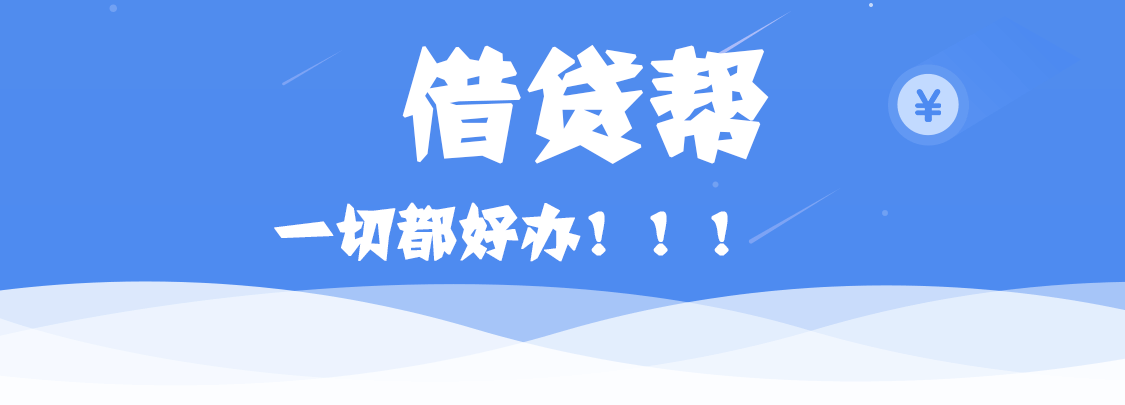
<style>
.page{position:relative;width:1125px;height:405px;background:#4f8bef}
.page>*{position:absolute;margin:0}
.t1{font:120px "JJianzi";color:#ffffff;font-weight:bold}
.t2{font:60px "JJianzi";color:#ffffff;font-weight:bold}
</style>
<div class="page">
<p class="t1" style="left:402px;top:44px;width:367px;height:120px">借贷帮</p>
<p class="t2" style="left:274px;top:202px;width:455px;height:60px">一切都好办！！！</p>
</div>
